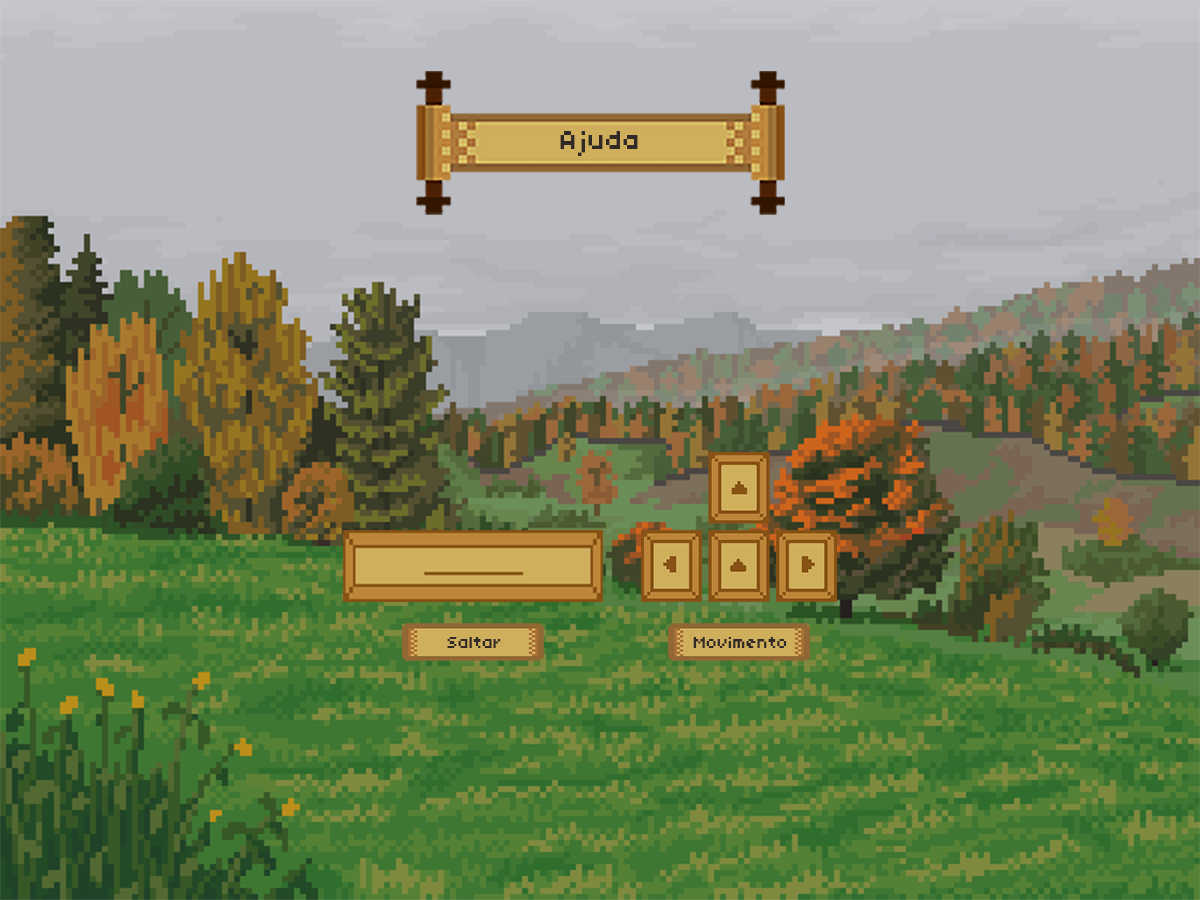
<style>
.page{position:relative;width:1200px;height:900px;background:#bbbcc2}
.page>*{position:absolute;margin:0}
.t1{font:28px "04b03";color:#302928}
.t2{font:17.6px "04b03";color:#302928}
</style>
<div class="page">
<p class="t1" style="left:560px;top:131px;width:78px;height:25px">Ajuda</p>
<p class="t2" style="left:447px;top:637px;width:54px;height:11px">Saltar</p>
<p class="t2" style="left:693px;top:637px;width:94px;height:11px">Movimento</p>
</div>
